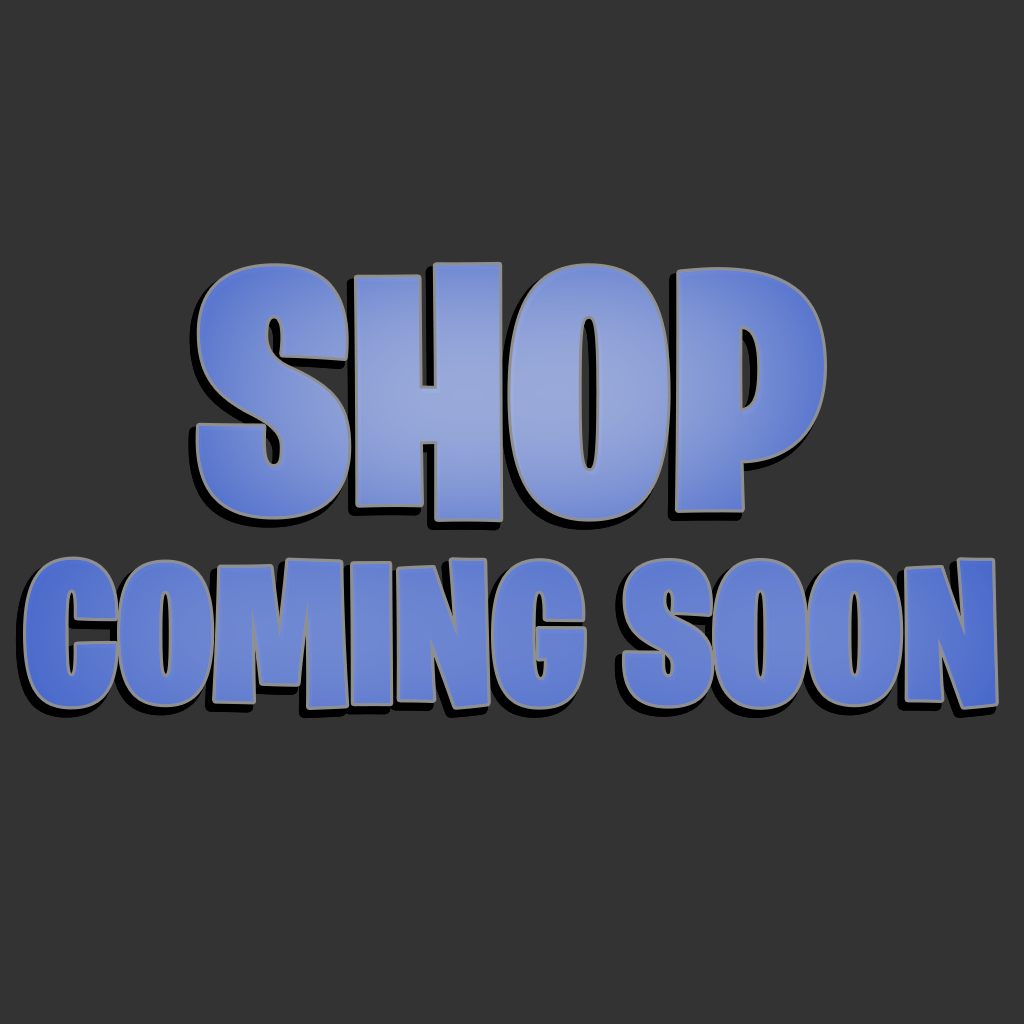
<style>
.page{position:relative;width:1024px;height:1024px;background:#333333}
.page>*{position:absolute;margin:0}
.t1{font:346.1px "BurbankBigCondensed-Black";color:#8196d5}
.t2{font:200px "BurbankBigCondensed-Black";color:#6580d0}
</style>
<div class="page">
<p class="t1" style="left:198px;top:264px;width:626px;height:256px">SHOP</p>
<p class="t2" style="left:26px;top:559px;width:970px;height:148px">COMING SOON</p>
</div>
